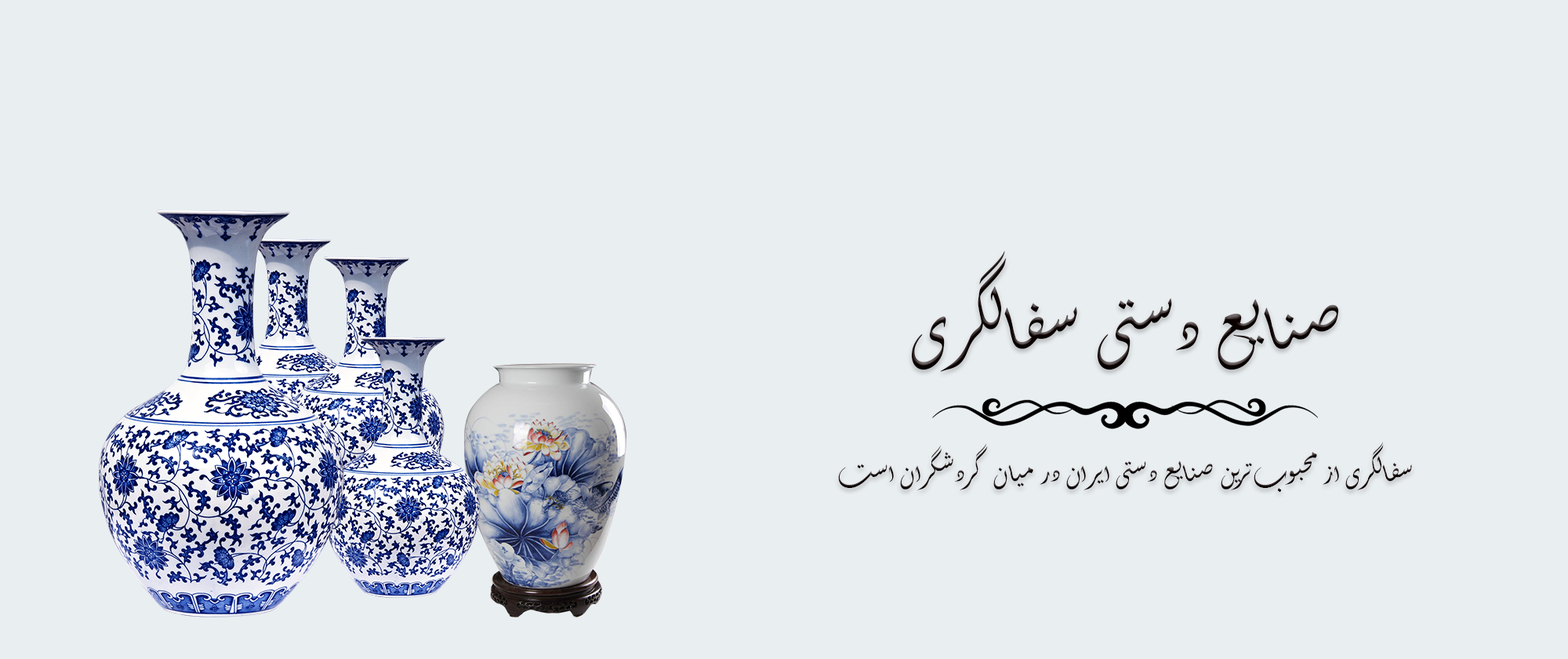
<style>
.page{position:relative;width:1568px;height:659px;background:#e9eef1}
.page>*{position:absolute;margin:0}
.t1{font:98px "Aldhabi";color:#0d0101}
.t2{font:39.2px "Aldhabi";color:#0d0101}
</style>
<div class="page">
<p class="t1" style="left:911px;top:251px;width:428px;height:121px">صنایع دستی سفالگری</p>
<p class="t2" style="left:838px;top:441px;width:574px;height:51px">سفالگری از محبوب‌ترین صنایع دستی ایران در میان گردشگران است</p>
</div>
